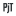
<style>
.page{position:relative;width:16px;height:16px;background:#ffffff}
.page>*{position:absolute;margin:0}
.t1{font:12px "OSP-DIN";color:#2f3537}
</style>
<div class="page">
<p class="t1" style="left:3px;top:3px;width:11px;height:11px">PjT</p>
</div>
